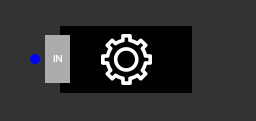
<style>
.page{position:relative;width:256px;height:121px;background:#333333}
.page>*{position:absolute;margin:0}
.t1{font:10px "MyriadPro-Regular";color:#ffffff}
</style>
<div class="page">
<p class="t1" style="left:53px;top:55px;width:9px;height:7px">IN</p>
</div>
